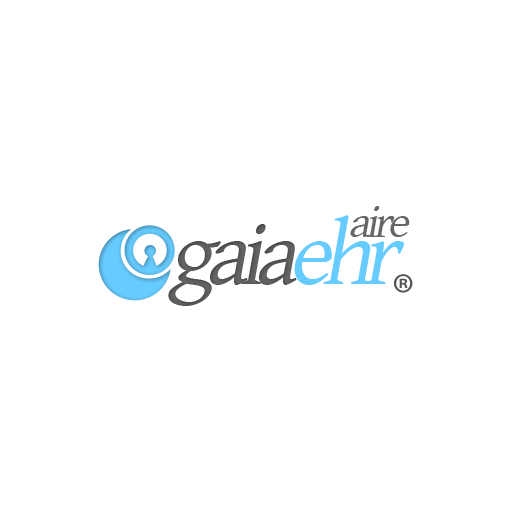
<style>
.page{position:relative;width:512px;height:512px;background:#ffffff}
.page>*{position:absolute;margin:0}
.t1{font:47.2px "GentiumBasic";letter-spacing:-0.1em;color:#666666;font-style:italic}
.t2{font:90.9px "GentiumBasic";letter-spacing:-0.1em;color:#66cbff;font-style:italic}
.t3{font:90.9px "GentiumBasic";letter-spacing:-0.1em;color:#666666;font-style:italic}
</style>
<div class="page">
<p class="t1" style="left:350px;top:206px;width:60px;height:31px">aire</p>
<p class="t2" style="left:294px;top:215px;width:111px;height:70px">ehr</p>
<p class="t3" style="left:209px;top:224px;width:88px;height:61px">aia</p>
<p class="t3" style="left:168px;top:241px;width:53px;height:65px">g</p>
</div>
